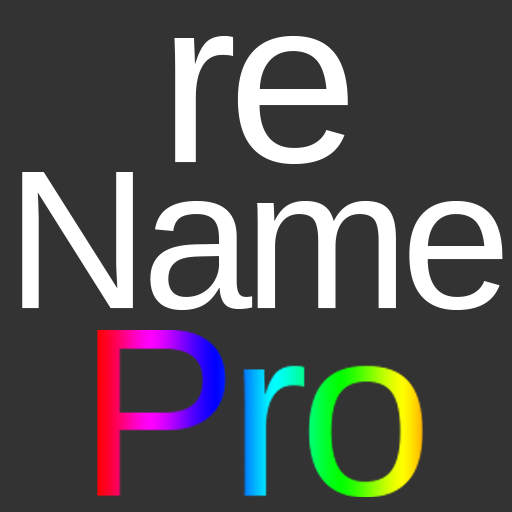
<style>
.page{position:relative;width:512px;height:512px;background:#333333}
.page>*{position:absolute;margin:0}
.t1{font:198.2px/146px "LiberationSans";letter-spacing:-0.04em;color:#ffffff}
.t2{font:234.2px/146px "LiberationSans";letter-spacing:-0.04em;color:#ffffff}
</style>
<div class="page">
<p class="t1" style="left:22px;top:36px;width:481px;height:274px;text-align:center"><span class="t2">re<br></span>Name</p>
</div>
